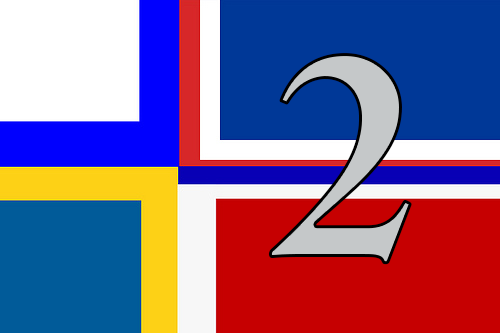
<style>
.page{position:relative;width:500px;height:333px}
.page>*{position:absolute;margin:0}
.t1{font:300px "ACaslonPro-Bold";color:#c5c8c9}
</style>
<div class="page">
<p class="t1" style="left:268px;top:53px;width:144px;height:212px">2</p>
</div>
